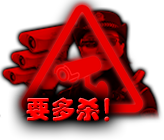
<style>
.page{position:relative;width:164px;height:140px;background:#ffffff}
.page>*{position:absolute;margin:0}
.t1{font:25px "STHupo"}
</style>
<div class="page">
<p class="t1" style="left:26px;top:97px;width:84px;height:25px">要多杀！</p>
</div>
